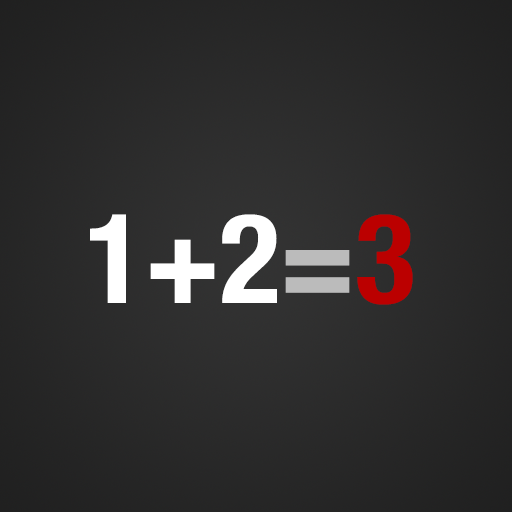
<style>
.page{position:relative;width:512px;height:512px}
.page>*{position:absolute;margin:0}
.t1{font:125px "HelveticaNeue-CondensedBold";color:#ffffff}
.t2{font:125px "HelveticaNeue-CondensedBold";color:#bbbbbb}
.t3{font:125px "HelveticaNeue-CondensedBold";color:#bb0000}
</style>
<div class="page">
<p class="t1" style="left:90px;top:214px;width:323px;height:91px">1+2<span class="t2">=</span><span class="t3">3</span></p>
</div>
